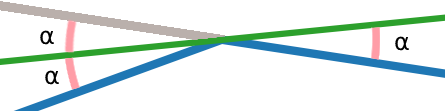
<style>
.page{position:relative;width:445px;height:111px;background:#ffffff}
.page>*{position:absolute;margin:0}
.t1{font:24px "DejaVuSans";color:#000000}
</style>
<div class="page">
<p class="t1" style="left:40px;top:30px;width:14px;height:15px">α</p>
<p class="t1" style="left:395px;top:36px;width:14px;height:15px">α</p>
<p class="t1" style="left:45px;top:70px;width:14px;height:15px">α</p>
</div>
